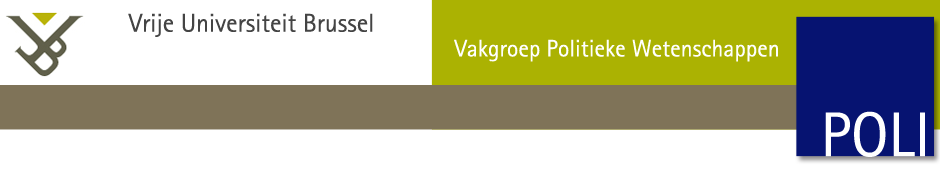
<style>
.page{position:relative;width:940px;height:170px;background:#ffffff}
.page>*{position:absolute;margin:0}
.t1{font:25.7px "RotisSansSerif";color:#444444}
.t2{font:23.7px "RotisSansSerif";color:#ffffff}
.t3{font:63.3px "RotisSansSerif";color:#ffffff}
</style>
<div class="page">
<p class="t1" style="left:128px;top:13px;width:245px;height:24px">Vrije Universiteit Brussel</p>
<p class="t2" style="left:454px;top:39px;width:324px;height:23px">Vakgroep Politieke Wetenschappen</p>
<p class="t3" style="left:825px;top:111px;width:100px;height:46px">POLI</p>
</div>
